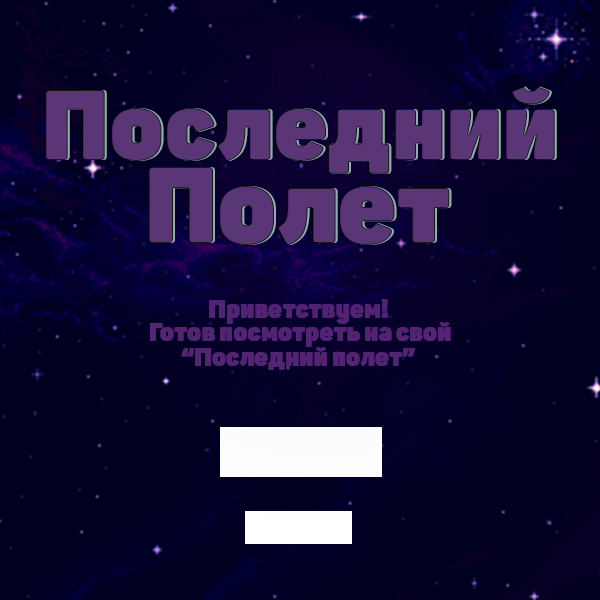
<style>
.page{position:relative;width:600px;height:600px;background:#000020}
.page>*{position:absolute;margin:0}
.t1{font:98.2px "Panton-ExtraBlack";color:#5a3676}
.t2{font:106.3px "Panton-ExtraBlack";color:#5a3676}
.t3{font:25.4px "Panton-ExtraBlack";color:#522274}
.t4{font:25.4px "Panton-ExtraBlack";color:#532373}
.t5{font:25.4px "Panton-ExtraBlack";color:#532473}
</style>
<div class="page">
<p class="t1" style="left:45px;top:86px;width:510px;height:88px">Последний</p>
<p class="t1" style="left:47px;top:86px;width:510px;height:88px">Последний</p>
<p class="t2" style="left:148px;top:167px;width:302px;height:78px">Полет</p>
<p class="t2" style="left:150px;top:167px;width:302px;height:78px">Полет</p>
<p class="t3" style="left:209px;top:299px;width:179px;height:25px">Приветствуем!</p>
<p class="t3" style="left:209px;top:299px;width:179px;height:25px">Приветствуем!</p>
<p class="t4" style="left:150px;top:322px;width:301px;height:25px">Готов посмотреть на свой</p>
<p class="t4" style="left:150px;top:322px;width:301px;height:25px">Готов посмотреть на свой</p>
<p class="t5" style="left:181px;top:347px;width:234px;height:23px">“Последний полет”</p>
<p class="t5" style="left:181px;top:347px;width:234px;height:23px">“Последний полет”</p>
</div>
